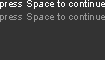
<style>
.page{position:relative;width:105px;height:60px;background:#333333}
.page>*{position:absolute;margin:0}
.t1{font:10px "ArialMT";color:#ffffff}
.t2{font:10px "ArialMT";color:#979797}
</style>
<div class="page">
<p class="t1" style="left:0px;top:0px;width:105px;height:9px">press Space to continue</p>
<p class="t2" style="left:0px;top:13px;width:105px;height:9px">press Space to continue</p>
</div>
